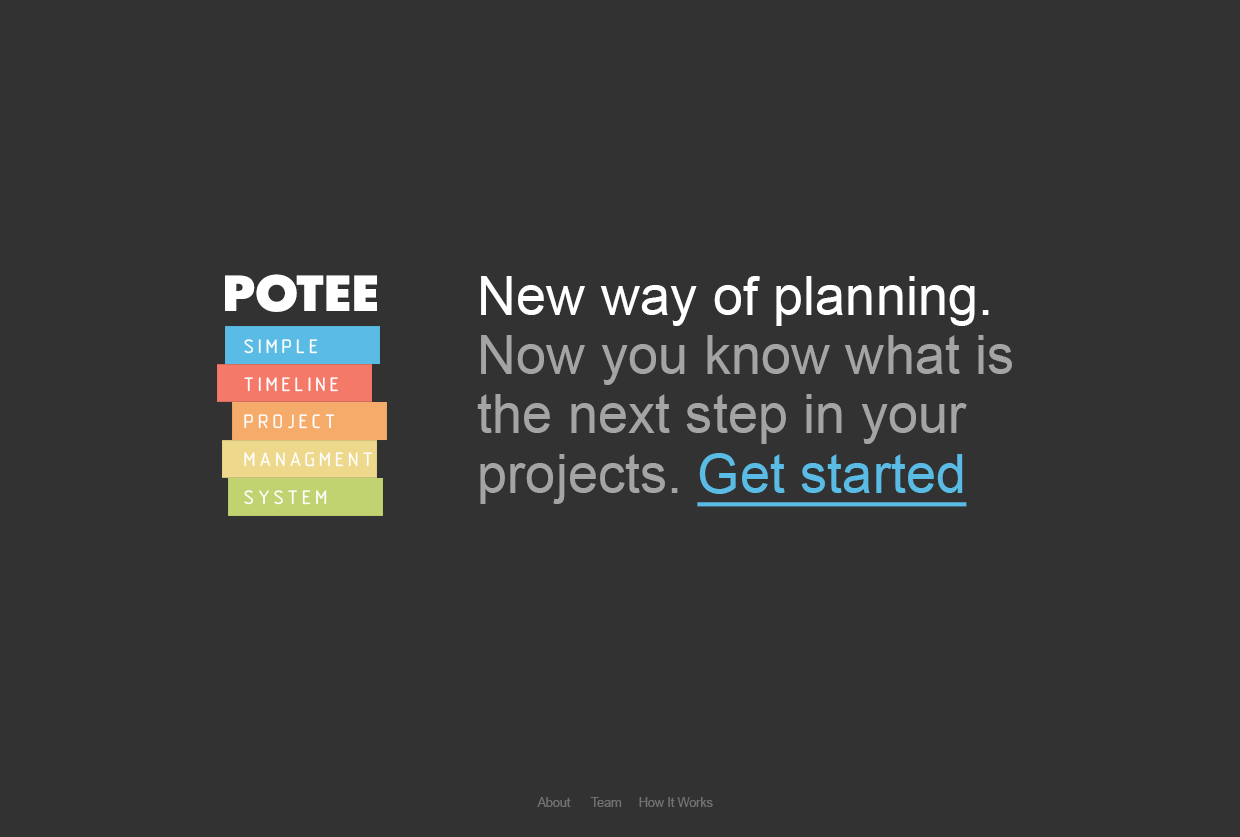
<style>
.page{position:relative;width:1240px;height:837px;background:#323232}
.page>*{position:absolute;margin:0}
.t1{font:46.5px "AFuturicaBlack";color:#ffffff;text-transform:uppercase}
.t2{font:54.4px/59.3px "ArialMT";color:#a5a4a4}
.t3{font:54.4px/59.3px "ArialMT";color:#ffffff}
.t4{font:54.4px/59.3px "ArialMT";color:#5abce4;text-decoration:underline}
.t5{font:19.8px/37.7px "GOST-2.304-81typeB";letter-spacing:0.18em;color:#ffffff;text-transform:uppercase}
.t6{font:12.5px "ArialMT";color:#717171}
</style>
<div class="page">
<p class="t1" style="left:225px;top:274px;width:152px;height:38px">Potee</p>
<p class="t2" style="left:477px;top:276px;width:535px;height:231px"><span class="t3">New way of planning. </span>Now you know what is the next step in your projects. <span class="t4">Get started</span></p>
<p class="t5" style="left:244px;top:339px;width:128px;height:166px">simple <br>timeline<br>project <br>managment <br>system</p>
<p class="t6" style="left:537px;top:797px;width:176px;height:10px">About      Team     How It Works</p>
</div>
